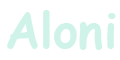
<style>
.page{position:relative;width:120px;height:60px;background:#ffffff}
.page>*{position:absolute;margin:0}
.t1{font:48px "ComicSansMS-Bold";color:#cff3e8}
</style>
<div class="page">
<p class="t1" style="left:7px;top:10px;width:109px;height:40px">Aloni</p>
</div>
